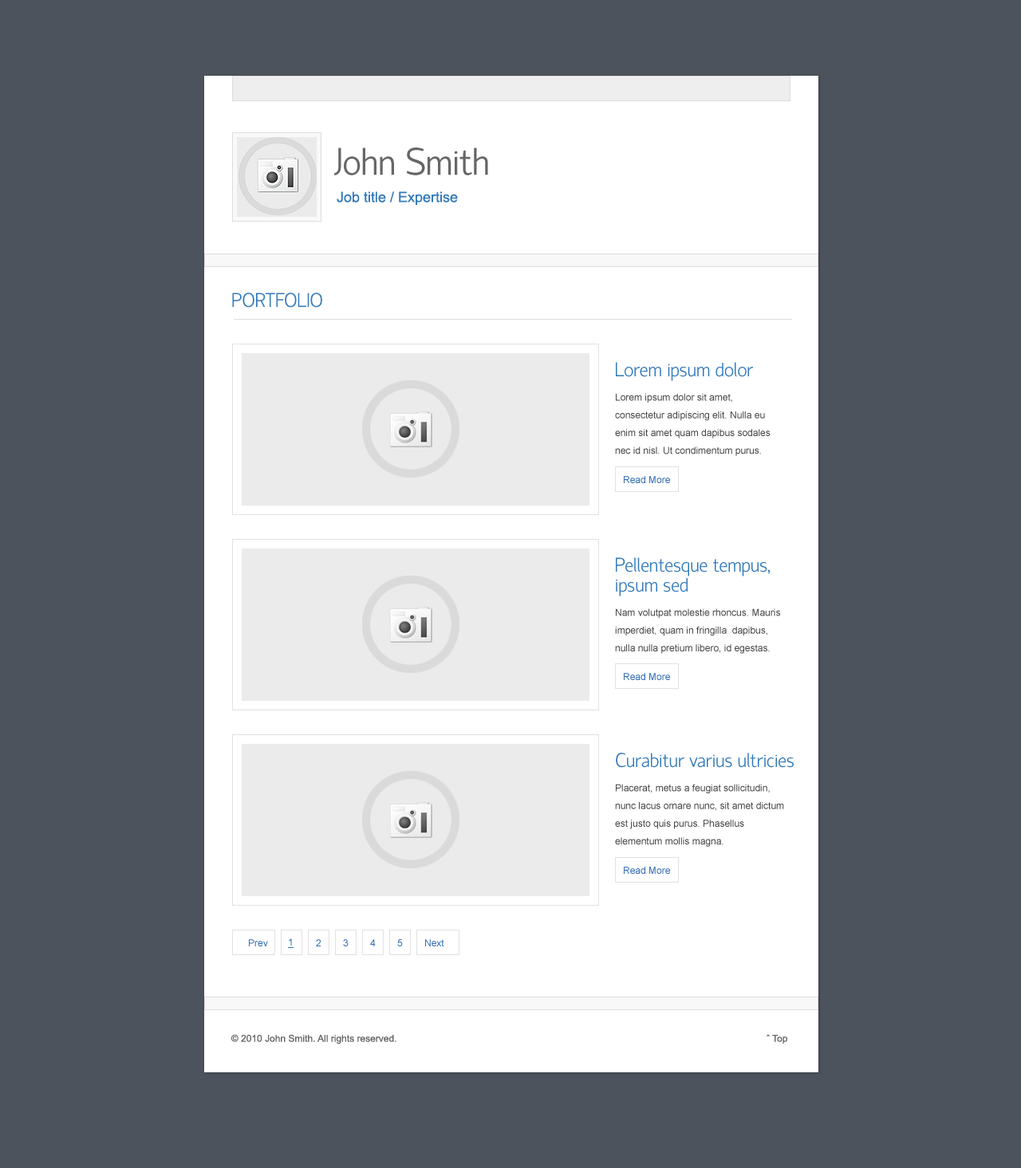
<style>
.page{position:relative;width:1021px;height:1168px;background:#4c535c}
.page>*{position:absolute;margin:0}
.t1{font:38.3px "MyriadPro-Regular";color:#666666}
.t2{font:14.4px "ArialMT";color:#3279bb}
.t3{font:19.9px "MyriadPro-Regular";color:#3279bb}
.t4{font:9.6px/17.7px "ArialMT";color:#454545}
.t5{font:19.9px/19.9px "MyriadPro-Regular";color:#3279bb}
.t6{font:9.6px "ArialMT";color:#666666}
</style>
<div class="page">
<p class="t1" style="left:333px;top:148px;width:155px;height:27px">John Smith</p>
<p class="t2" style="left:337px;top:191px;width:121px;height:14px">Job title / Expertise</p>
<p class="t3" style="left:232px;top:293px;width:90px;height:15px">PORTFOLIO</p>
<p class="t3" style="left:616px;top:362px;width:137px;height:19px">Lorem ipsum dolor</p>
<p class="t4" style="left:615px;top:393px;width:155px;height:63px">Lorem ipsum dolor sit amet, <br>consectetur adipiscing elit. Nulla eu <br>enim sit amet quam dapibus sodales <br>nec id nisl. Ut condimentum purus.</p>
<p class="t5" style="left:616px;top:557px;width:154px;height:39px">Pellentesque tempus,<br>ipsum sed</p>
<p class="t4" style="left:615px;top:608px;width:165px;height:46px">Nam volutpat molestie rhoncus. Mauris <br>imperdiet, quam in fringilla  dapibus, <br>nulla nulla pretium libero, id egestas.</p>
<p class="t3" style="left:616px;top:753px;width:177px;height:15px">Curabitur varius ultricies</p>
<p class="t4" style="left:615px;top:784px;width:169px;height:63px">Placerat, metus a feugiat sollicitudin, <br>nunc lacus ornare nunc, sit amet dictum <br>est justo quis purus. Phasellus <br>elementum mollis magna.</p>
<p class="t6" style="left:230px;top:1034px;width:166px;height:11px">© 2010 John Smith. All rights reserved.</p>
<p class="t6" style="left:766px;top:1034px;width:21px;height:10px">ˆ Top</p>
</div>
